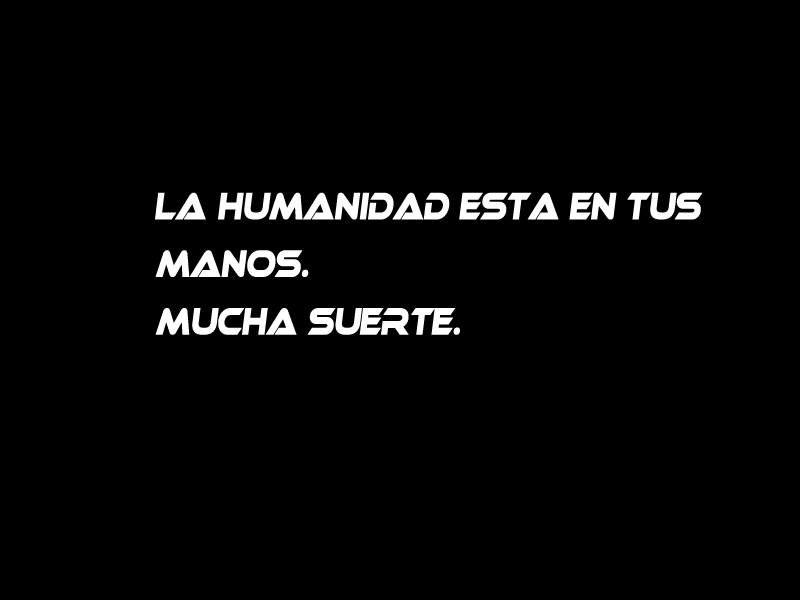
<style>
.page{position:relative;width:800px;height:600px;background:#000000}
.page>*{position:absolute;margin:0}
.t1{font:36px "Ethnocentric";letter-spacing:-0.005em;color:#ffffff;font-weight:bold;font-style:italic;scale:0.69 1}
</style>
<div class="page">
<p class="t1" style="left:155px;top:192px;width:548px;height:143px">La humanidad esta en tus<br><br>manos.<br><br>Mucha suerte.</p>
</div>
